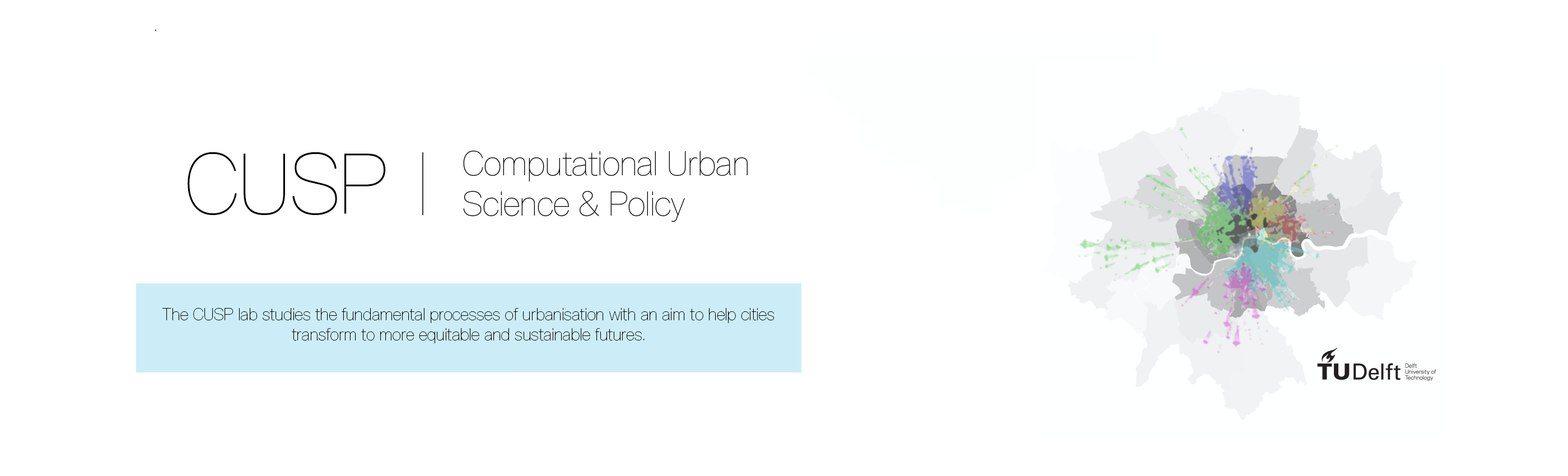
<style>
.page{position:relative;width:1568px;height:476px;background:#ffffff}
.page>*{position:absolute;margin:0}
.t1{font:84px "TUDelft-UltraLight";color:#000000}
.t2{font:33.6px "TUDelft-UltraLight";color:#000000}
.t3{font:16.8px "TUDelft-UltraLight";color:#000000}
</style>
<div class="page">
<p class="t1" style="left:188px;top:152px;width:198px;height:63px">CUSP</p>
<p class="t2" style="left:463px;top:150px;width:285px;height:72px">Computational Urban Science &amp; Policy</p>
<p class="t3" style="left:162px;top:308px;width:612px;height:35px;text-align:center">The CUSP lab studies the fundamental processes of urbanisation with an aim to help cities transform to more equitable and sustainable futures.</p>
</div>
